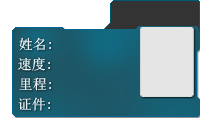
<style>
.page{position:relative;width:200px;height:118px}
.page>*{position:absolute;margin:0}
.t1{font:14px "SimSun";color:#ffffff}
.t2{font:14px "SimSun"}
</style>
<div class="page">
<p class="t1" style="left:19px;top:37px;width:32px;height:14px">姓名:</p>
<p class="t2" style="left:18px;top:57px;width:32px;height:14px">速度:</p>
<p class="t1" style="left:19px;top:77px;width:32px;height:14px">里程:</p>
<p class="t1" style="left:18px;top:97px;width:32px;height:14px">证件:</p>
</div>
